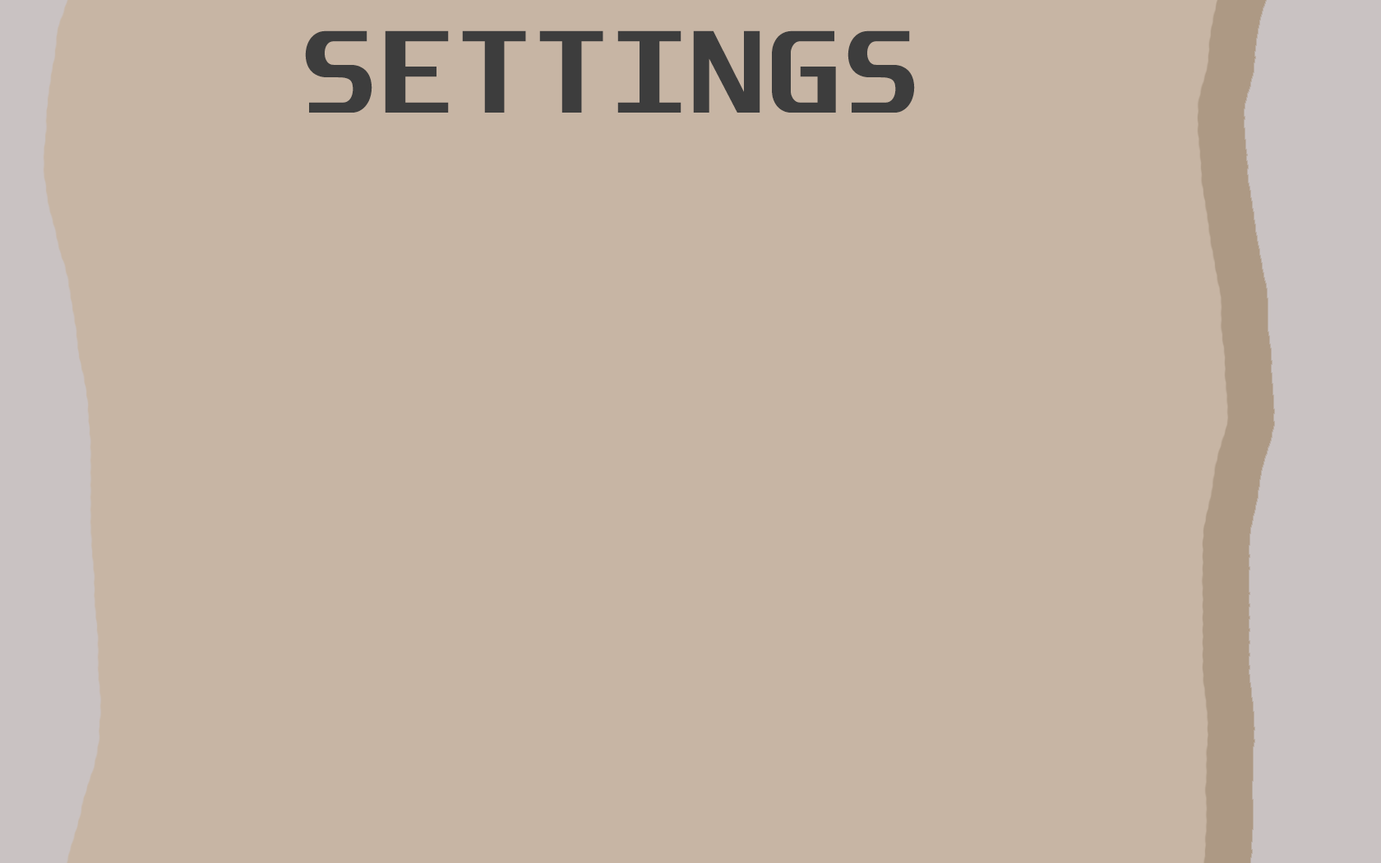
<style>
.page{position:relative;width:1381px;height:863px;background:#c7b5a4}
.page>*{position:absolute;margin:0}
.t1{font:100.3px "Unispace-Bold";color:#3d3d3d;scale:1.27 1}
</style>
<div class="page">
<p class="t1" style="left:305px;top:30px;width:610px;height:83px">SETTINGS</p>
</div>
